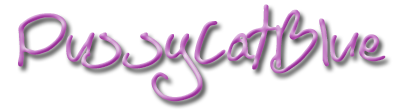
<style>
.page{position:relative;width:400px;height:110px;background:#ffffff}
.page>*{position:absolute;margin:0}
.t1{font:72px "BNFontBoy"}
</style>
<div class="page">
<p class="t1" style="left:18px;top:4px;width:368px;height:98px">PussyCatBlue</p>
</div>
